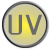
<style>
.page{position:relative;width:50px;height:50px;background:#ffffff}
.page>*{position:absolute;margin:0}
.t1{font:30px "TVpl";letter-spacing:0.05em;color:#6a6a6a;scale:0.83 1}
</style>
<div class="page">
<p class="t1" style="left:8px;top:14px;width:34px;height:21px">uv</p>
</div>
